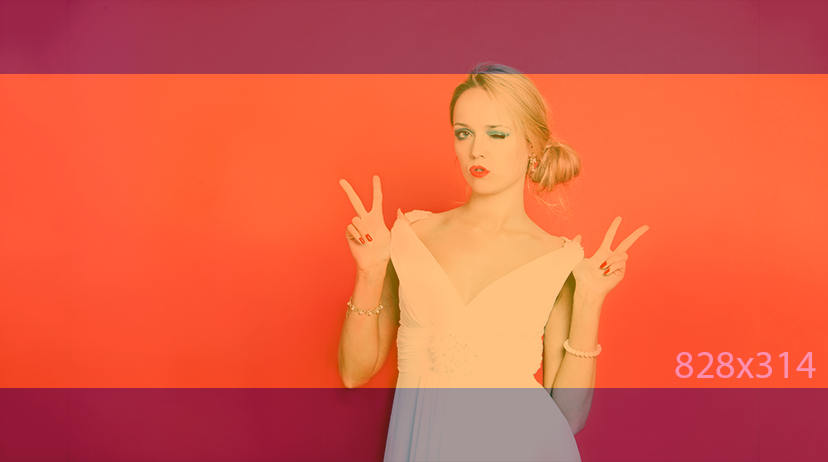
<style>
.page{position:relative;width:828px;height:462px}
.page>*{position:absolute;margin:0}
.t1{font:40px "MyriadPro-Regular";color:#fd8fad}
</style>
<div class="page">
<p class="t1" style="left:675px;top:352px;width:141px;height:26px">828x314</p>
</div>
